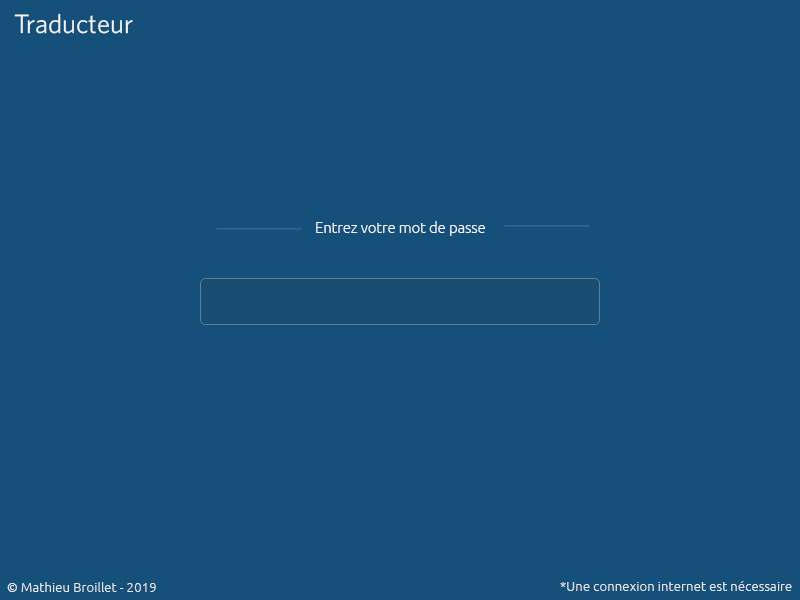
<style>
.page{position:relative;width:800px;height:600px;background:#145079}
.page>*{position:absolute;margin:0}
.t1{font:26.7px "Whitney-Book";color:#f3f3f3}
.t2{font:14.7px "Ubuntu-Light";color:#f4f7f9}
.t3{font:13.3px "Ubuntu-Light";color:#e6e6e6}
</style>
<div class="page">
<p class="t1" style="left:14px;top:13px;width:119px;height:21px">Traducteur</p>
<p class="t2" style="left:316px;top:221px;width:169px;height:15px">Entrez votre mot de passe</p>
<p class="t3" style="left:7px;top:582px;width:149px;height:10px">© Mathieu Broillet - 2019</p>
<p class="t3" style="left:560px;top:581px;width:232px;height:10px">*Une connexion internet est nécessaire</p>
</div>
